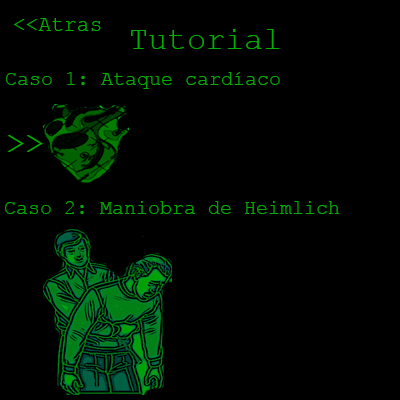
<style>
.page{position:relative;width:400px;height:400px;background:#000000}
.page>*{position:absolute;margin:0}
.t1{font:23.1px "CourierNewPSMT";color:#03ad03;scale:0.92 1}
.t2{font:32px "CourierNewPSMT";color:#03ad03}
.t3{font:20px "CourierNewPSMT";color:#03ad03}
</style>
<div class="page">
<p class="t1" style="left:14px;top:18px;width:87px;height:13px">&lt;&lt;Atras</p>
<p class="t2" style="left:131px;top:29px;width:149px;height:20px">Tutorial</p>
<p class="t3" style="left:6px;top:72px;width:274px;height:17px">Caso 1: Ataque cardíaco</p>
<p class="t2" style="left:8px;top:135px;width:35px;height:17px">&gt;&gt;</p>
<p class="t3" style="left:5px;top:201px;width:335px;height:13px">Caso 2: Maniobra de Heimlich</p>
</div>
